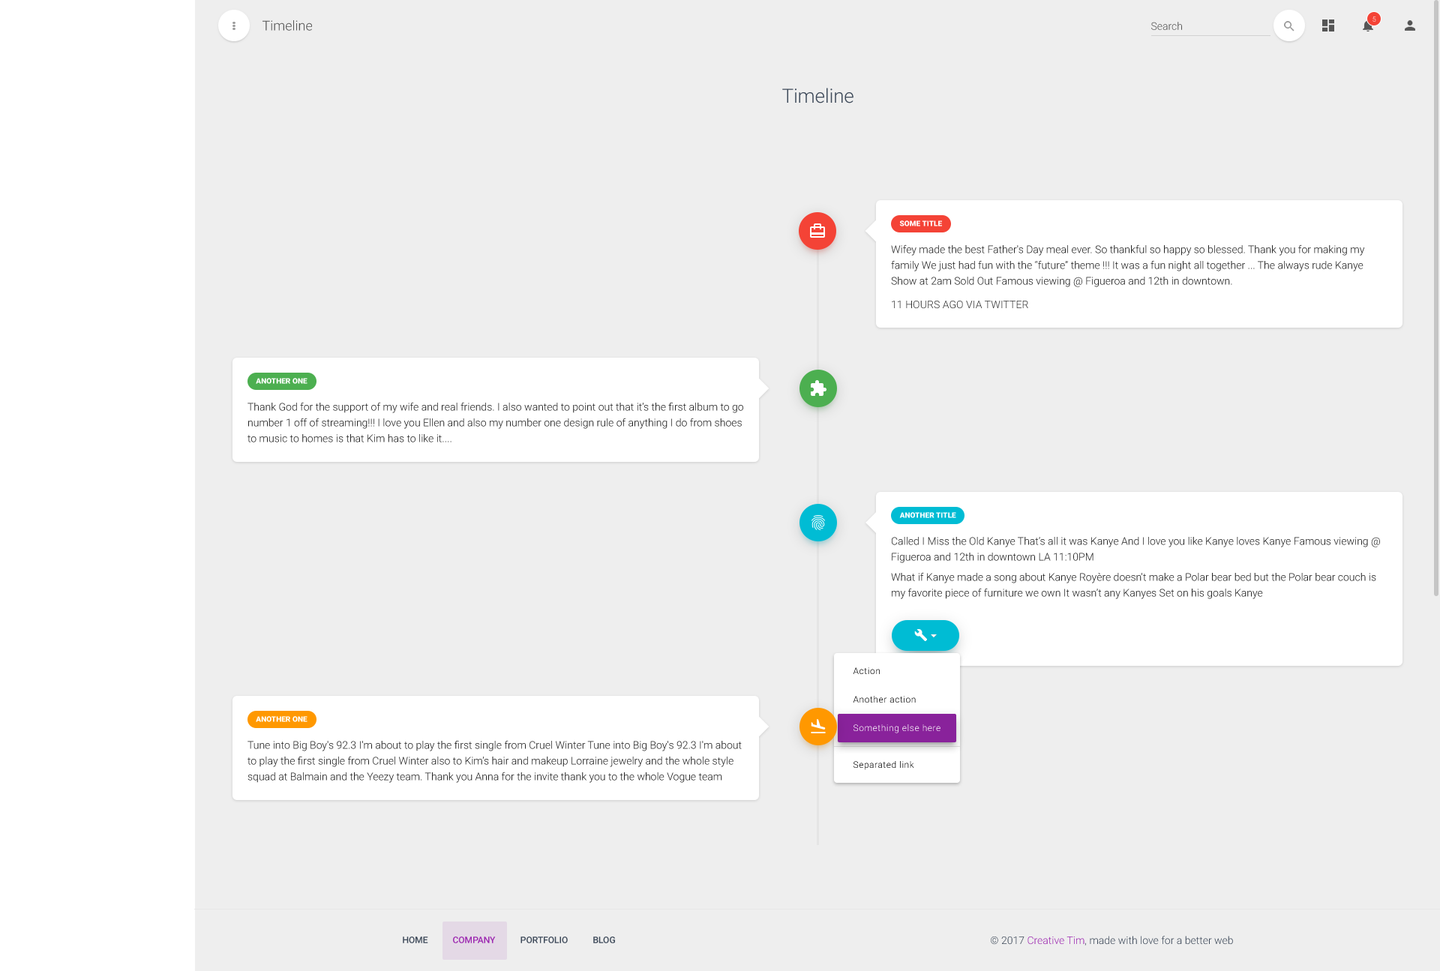
<style>
.page{position:relative;width:1440px;height:971px;background:#eeeeee}
.page>*{position:absolute;margin:0}
.t1{font:6.8px "Roboto-Light"}
.t2{font:13.5px "Roboto-Light";color:#555555}
.t3{font:10.5px "Roboto-Light";color:#555555}
.t4{font:19.5px "Roboto-Light";letter-spacing:-0.005em;color:#3c4858}
.t5{font:7.5px "Roboto-Black";letter-spacing:0.005em;color:#ffffff}
.t6{font:10.5px/15.8px "Roboto-Light";color:#212121}
.t7{font:10.5px "Roboto-Light";letter-spacing:0.005em;color:#333333}
.t8{font:9px "Roboto-Light";letter-spacing:0.045em}
.t9{font:9px "Roboto-Medium";color:#3c4858}
.t10{font:9px "Roboto-Medium";color:#9c27b0}
.t11{font:10.5px "Roboto-Light";color:#3c4858}
.t12{font:10.5px "Roboto-Light";color:#9c27b0}
</style>
<div class="page">
<p class="t1" style="left:1372px;top:16px;width:4px;height:6px">5</p>
<p class="t2" style="left:262px;top:20px;width:50px;height:11px">Timeline</p>
<p class="t3" style="left:1151px;top:22px;width:31px;height:8px">Search</p>
<p class="t4" style="left:782px;top:88px;width:72px;height:16px">Timeline</p>
<p class="t5" style="left:899px;top:220px;width:43px;height:6px">SOME TITLE</p>
<p class="t6" style="left:891px;top:244px;width:474px;height:43px">Wifey made the best Father's Day meal ever. So thankful so happy so blessed. Thank you for making my family We just had fun with the “future” theme !!! It was a fun night all together ... The always rude Kanye Show at 2am Sold Out Famous viewing @ Figueroa and 12th in downtown.</p>
<p class="t7" style="left:892px;top:301px;width:136px;height:8px">11 HOURS AGO VIA TWITTER</p>
<p class="t5" style="left:256px;top:378px;width:52px;height:6px">ANOTHER ONE</p>
<p class="t6" style="left:248px;top:402px;width:495px;height:40px">Thank God for the support of my wife and real friends. I also wanted to point out that it’s the first album to go number 1 off of streaming!!! I love you Ellen and also my number one design rule of anything I do from shoes to music to homes is that Kim has to like it....</p>
<p class="t5" style="left:899px;top:512px;width:57px;height:6px">ANOTHER TITLE</p>
<p class="t6" style="left:892px;top:537px;width:488px;height:26px">Called I Miss the Old Kanye That’s all it was Kanye And I love you like Kanye loves Kanye Famous viewing @ Figueroa and 12th in downtown LA 11:10PM</p>
<p class="t6" style="left:891px;top:572px;width:485px;height:27px">What if Kanye made a song about Kanye Royère doesn't make a Polar bear bed but the Polar bear couch is my favorite piece of furniture we own It wasn’t any Kanyes Set on his goals Kanye</p>
<p class="t8" style="left:853px;top:668px;width:27px;height:6px">Action</p>
<p class="t8" style="left:853px;top:696px;width:63px;height:7px">Another action</p>
<p class="t5" style="left:256px;top:716px;width:52px;height:6px">ANOTHER ONE</p>
<p class="t8" style="left:854px;top:724px;width:86px;height:10px">Something else here</p>
<p class="t6" style="left:248px;top:740px;width:494px;height:43px">Tune into Big Boy's 92.3 I'm about to play the first single from Cruel Winter Tune into Big Boy's 92.3 I'm about to play the first single from Cruel Winter also to Kim’s hair and makeup Lorraine jewelry and the whole style squad at Balmain and the Yeezy team. Thank you Anna for the invite thank you to the whole Vogue team</p>
<p class="t8" style="left:854px;top:761px;width:60px;height:9px">Separated link</p>
<p class="t9" style="left:403px;top:937px;width:25px;height:7px">HOME</p>
<p class="t10" style="left:453px;top:937px;width:43px;height:7px">COMPANY</p>
<p class="t9" style="left:520px;top:937px;width:48px;height:7px">PORTFOLIO</p>
<p class="t9" style="left:593px;top:937px;width:22px;height:7px">BLOG</p>
<p class="t11" style="left:991px;top:936px;width:242px;height:10px">© 2017 <span class="t12">Creative Tim</span>, made with love for a better web</p>
</div>
